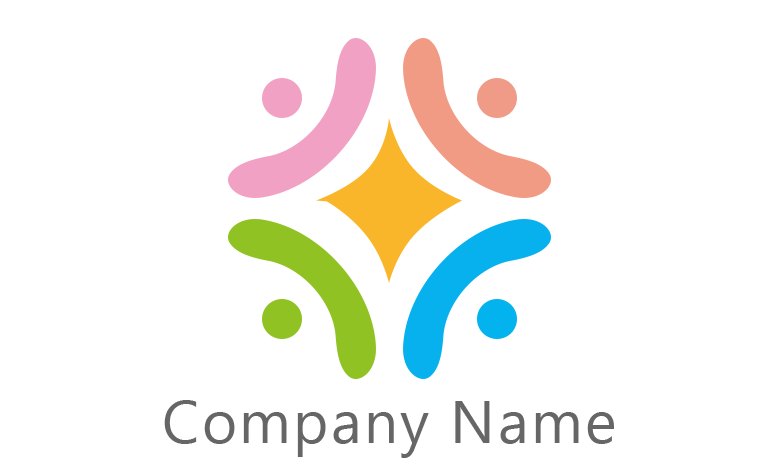
<style>
.page{position:relative;width:760px;height:470px;background:#ffffff}
.page>*{position:absolute;margin:0}
.t1{font:60px "MicrosoftNewTaiLue";letter-spacing:0.04em;color:#666666}
</style>
<div class="page">
<p class="t1" style="left:164px;top:400px;width:450px;height:58px">Company Name</p>
</div>
